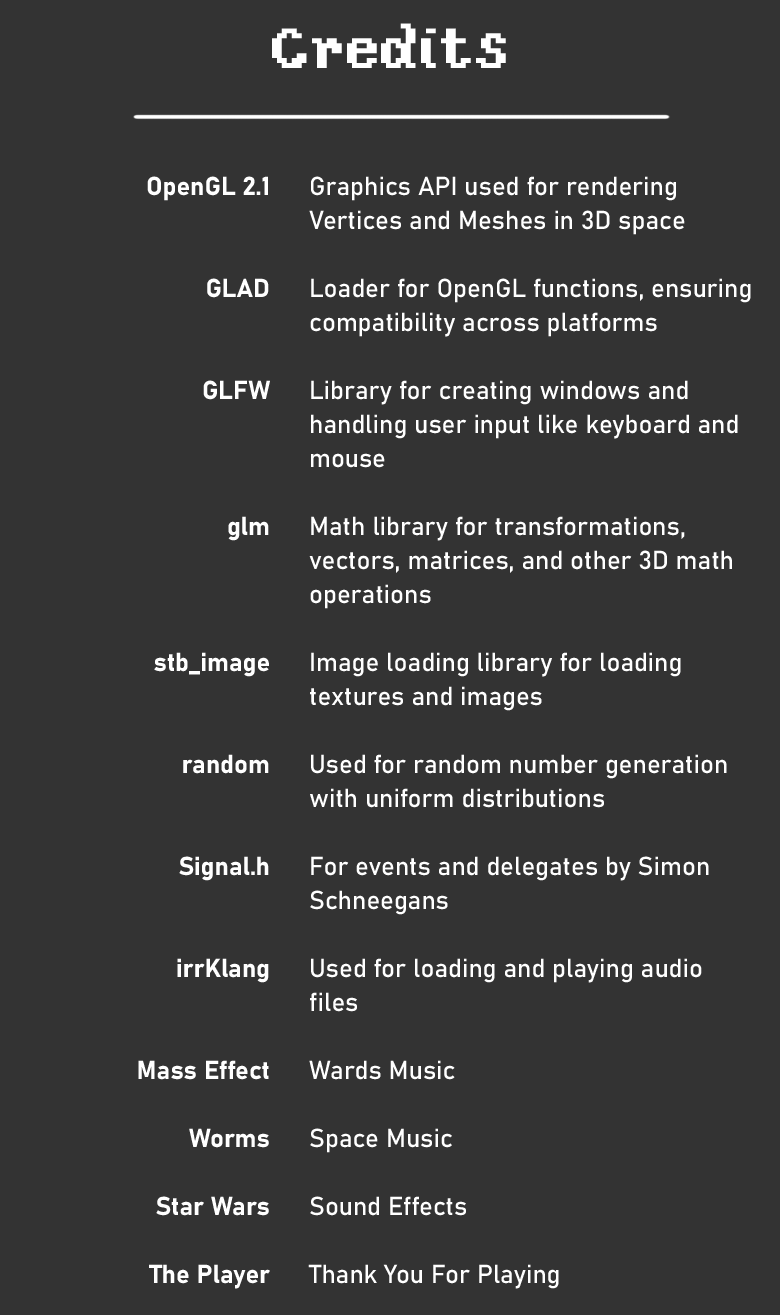
<style>
.page{position:relative;width:780px;height:1315px;background:#333333}
.page>*{position:absolute;margin:0}
.t1{font:59.7px "YosterIslandReg";color:#ffffff}
.t2{font:25.7px/34px "Bahnschrift-Bold";color:#ffffff}
.t3{font:25.7px/34px "Bahnschrift";color:#ffffff}
</style>
<div class="page">
<p class="t1" style="left:272px;top:23px;width:234px;height:45px">Credits</p>
<p class="t2" style="left:138px;top:176px;width:132px;height:1113px;text-align:right">OpenGL 2.1<br><br><br>GLAD<br><br><br>GLFW<br><br><br><br>glm<br><br><br><br>stb_image<br><br><br>random<br><br><br>Signal.h<br><br><br>irrKlang<br><br><br>Mass Effect<br><br>Worms<br><br>Star Wars<br><br>The Player</p>
<p class="t3" style="left:308px;top:176px;width:443px;height:1113px">Graphics API used for rendering Vertices and Meshes in 3D space<br><br>Loader for OpenGL functions, ensuring compatibility across platforms<br><br>Library for creating windows and handling user input like keyboard and mouse<br><br>Math library for transformations, vectors, matrices, and other 3D math operations<br><br>Image loading library for loading textures and images<br><br>Used for random number generation with uniform distributions<br><br>For events and delegates by Simon Schneegans<br><br>Used for loading and playing audio files<br><br>Wards Music<br><br>Space Music<br><br>Sound Effects<br><br>Thank You For Playing</p>
</div>
